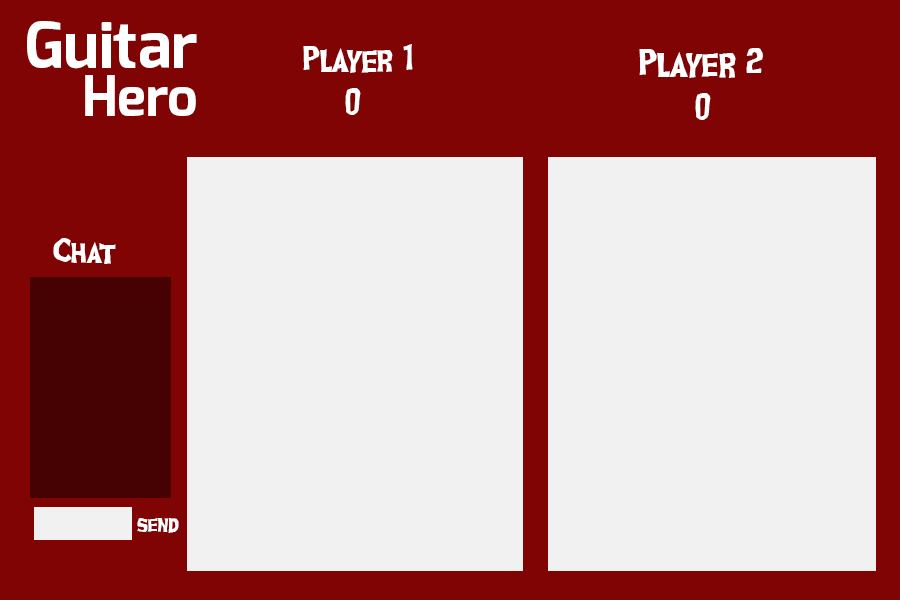
<style>
.page{position:relative;width:900px;height:600px;background:#f1f1f1}
.page>*{position:absolute;margin:0}
.t1{font:64px "Exo-Bold";color:#ffffff}
.t2{font:41px "GhoulishFrightAOE";color:#ffffff}
.t3{font:44px "GhoulishFrightAOE";color:#ffffff}
.t4{font:55px "Exo-Bold";color:#ffffff}
.t5{font:37px "GhoulishFrightAOE";color:#ffffff}
.t6{font:26px "GhoulishFrightAOE";color:#ffffff}
</style>
<div class="page">
<p class="t1" style="left:27px;top:21px;width:170px;height:48px">Guitar</p>
<p class="t2" style="left:303px;top:44px;width:110px;height:29px">Player 1</p>
<p class="t3" style="left:639px;top:48px;width:124px;height:30px">Player 2</p>
<p class="t4" style="left:85px;top:75px;width:111px;height:41px">Hero</p>
<p class="t2" style="left:345px;top:88px;width:16px;height:27px">0</p>
<p class="t2" style="left:695px;top:93px;width:16px;height:27px">0</p>
<p class="t5" style="left:53px;top:238px;width:63px;height:26px">Chat</p>
<p class="t6" style="left:137px;top:518px;width:42px;height:15px">send</p>
</div>
